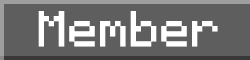
<style>
.page{position:relative;width:250px;height:60px;background:#5e5e5e}
.page>*{position:absolute;margin:0}
.t1{font:40.4px "Minecraft";letter-spacing:0.02em;color:#ffffff}
</style>
<div class="page">
<p class="t1" style="left:38px;top:11px;width:180px;height:36px">Member</p>
</div>
